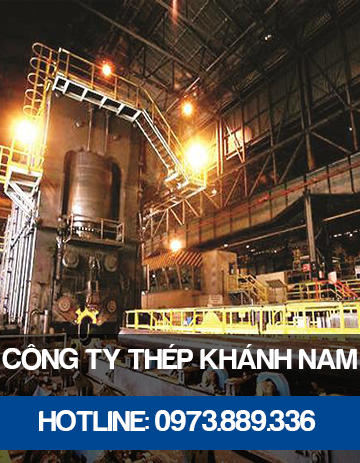
<style>
.page{position:relative;width:360px;height:463px}
.page>*{position:absolute;margin:0}
.t1{font:30px "FS-Harabara";color:#ffffff}
</style>
<div class="page">
<p class="t1" style="left:2px;top:344px;width:355px;height:26px">CÔNG TY THÉP KHÁNH NAM</p>
<p class="t1" style="left:39px;top:410px;width:277px;height:21px">HOTLINE: 0973.889.336</p>
</div>
